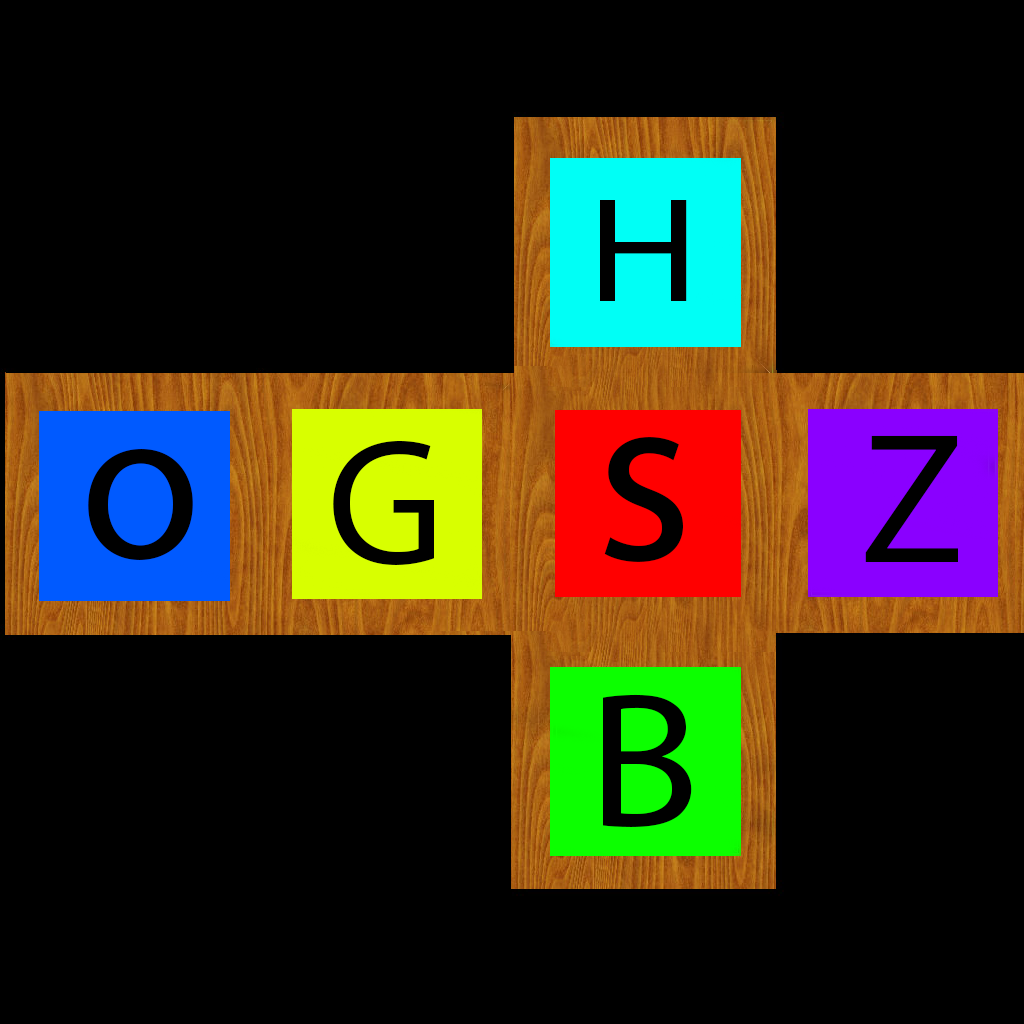
<style>
.page{position:relative;width:1024px;height:1024px;background:#000000}
.page>*{position:absolute;margin:0}
.t1{font:150.3px "MyriadPro-Regular";color:#000000;scale:1.14 1}
.t2{font:247.9px "MyriadPro-Regular";color:#000000}
.t3{font:187.3px "MyriadPro-Regular";color:#000000}
.t4{font:220.8px "MyriadPro-Regular";color:#000000}
.t5{font:181.2px "MyriadPro-Regular";color:#000000}
.t6{font:192.2px "MyriadPro-Regular";color:#000000;scale:1.08 1}
</style>
<div class="page">
<p class="t1" style="left:600px;top:200px;width:87px;height:101px">H</p>
<p class="t2" style="left:604px;top:437px;width:79px;height:125px">s</p>
<p class="t3" style="left:865px;top:435px;width:93px;height:127px">Z</p>
<p class="t4" style="left:88px;top:449px;width:105px;height:111px">o</p>
<p class="t5" style="left:333px;top:441px;width:101px;height:124px">G</p>
<p class="t6" style="left:603px;top:694px;width:89px;height:133px">B</p>
</div>
